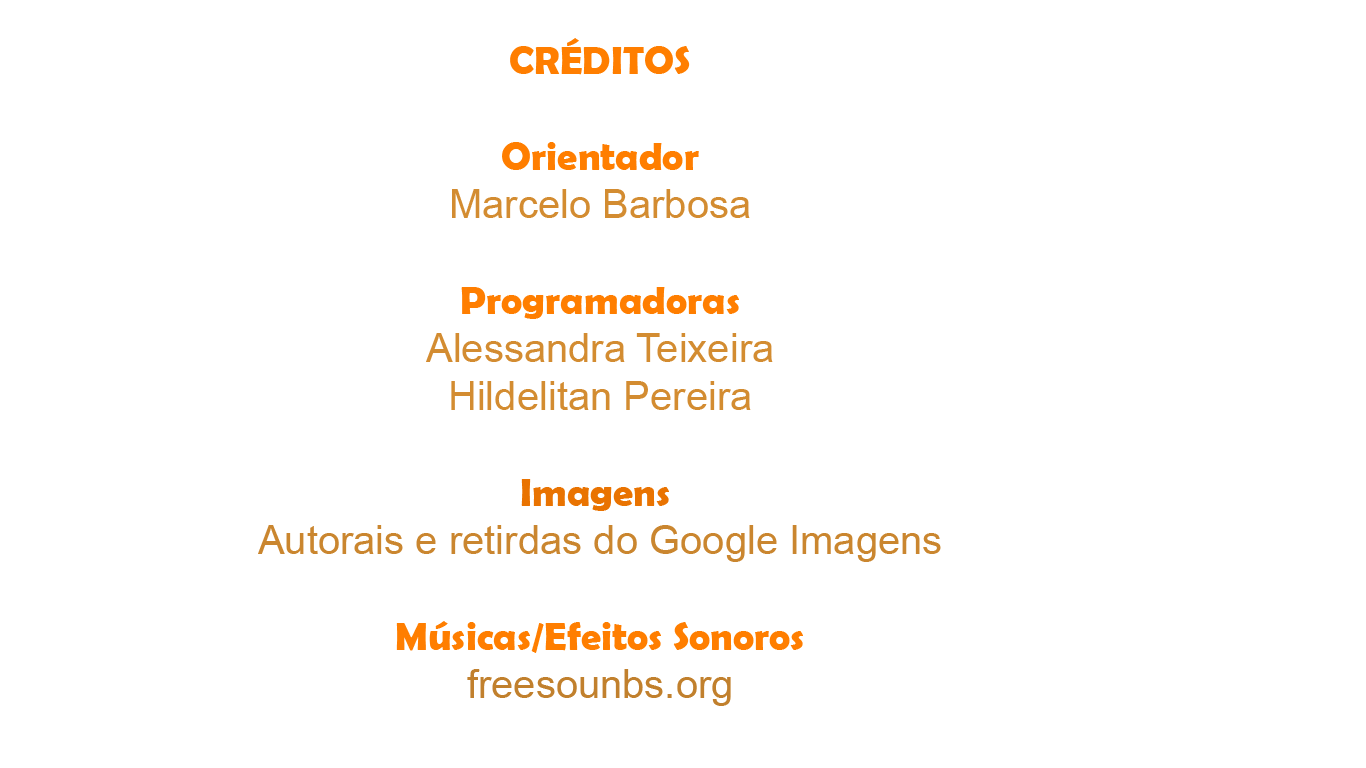
<style>
.page{position:relative;width:1366px;height:768px;background:#ffffff}
.page>*{position:absolute;margin:0}
.t1{font:40px "ArialMT";color:#d38c31}
.t2{font:40px "BerlinSansFBDemi-Bold";color:#ff7e00}
.t3{font:40px "BerlinSansFBDemi-Bold";color:#e97301}
.t4{font:40px "ArialMT";color:#ca862f}
.t5{font:40px "ArialMT";color:#c1802d}
</style>
<div class="page">
<p class="t1" style="left:258px;top:38px;width:683px;height:668px;text-align:center"><span class="t2">CRÉDITOS<br><br>Orientador<br></span>Marcelo Barbosa<br><br><span class="t2">Programadoras<br></span>Alessandra Teixeira<br>Hildelitan Pereira<br><br><span class="t3">Imagens <br></span><span class="t4">Autorais e retirdas do Google Imagens<br><br></span><span class="t2">Músicas/Efeitos Sonoros<br></span><span class="t5">freesounbs.org</span></p>
</div>
